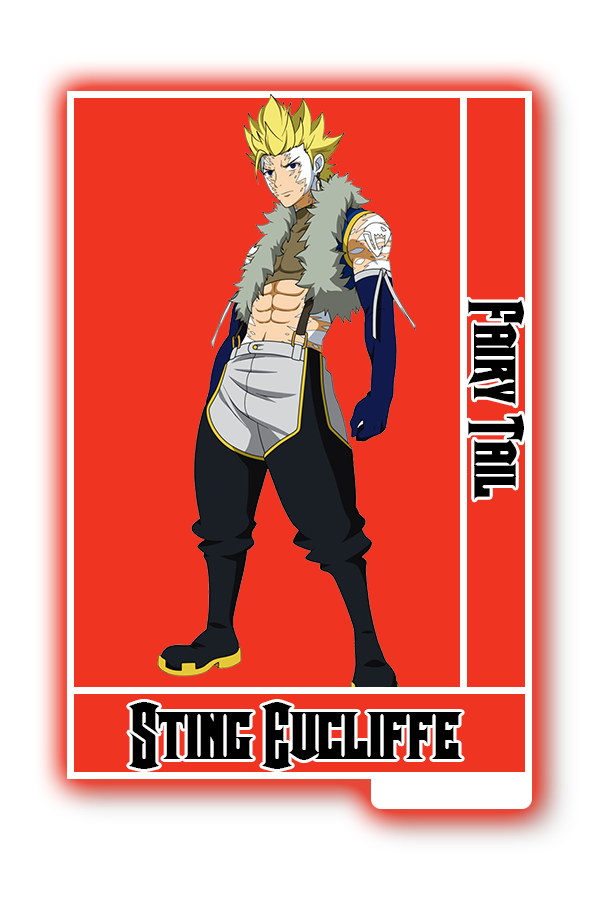
<style>
.page{position:relative;width:600px;height:900px;background:#ef3422}
.page>*{position:absolute;margin:0}
.t1{font:61.5px "Crown-Title";color:#000000}
.t2{font:70.1px "Crown-Title";color:#000000}
</style>
<div class="page">
<p class="t1" style="left:468px;top:299px;width:56px;height:201px;rotate:90deg">Fairy Tail</p>
<p class="t2" style="left:129px;top:702px;width:333px;height:67px">Sting Eucliffe</p>
</div>
